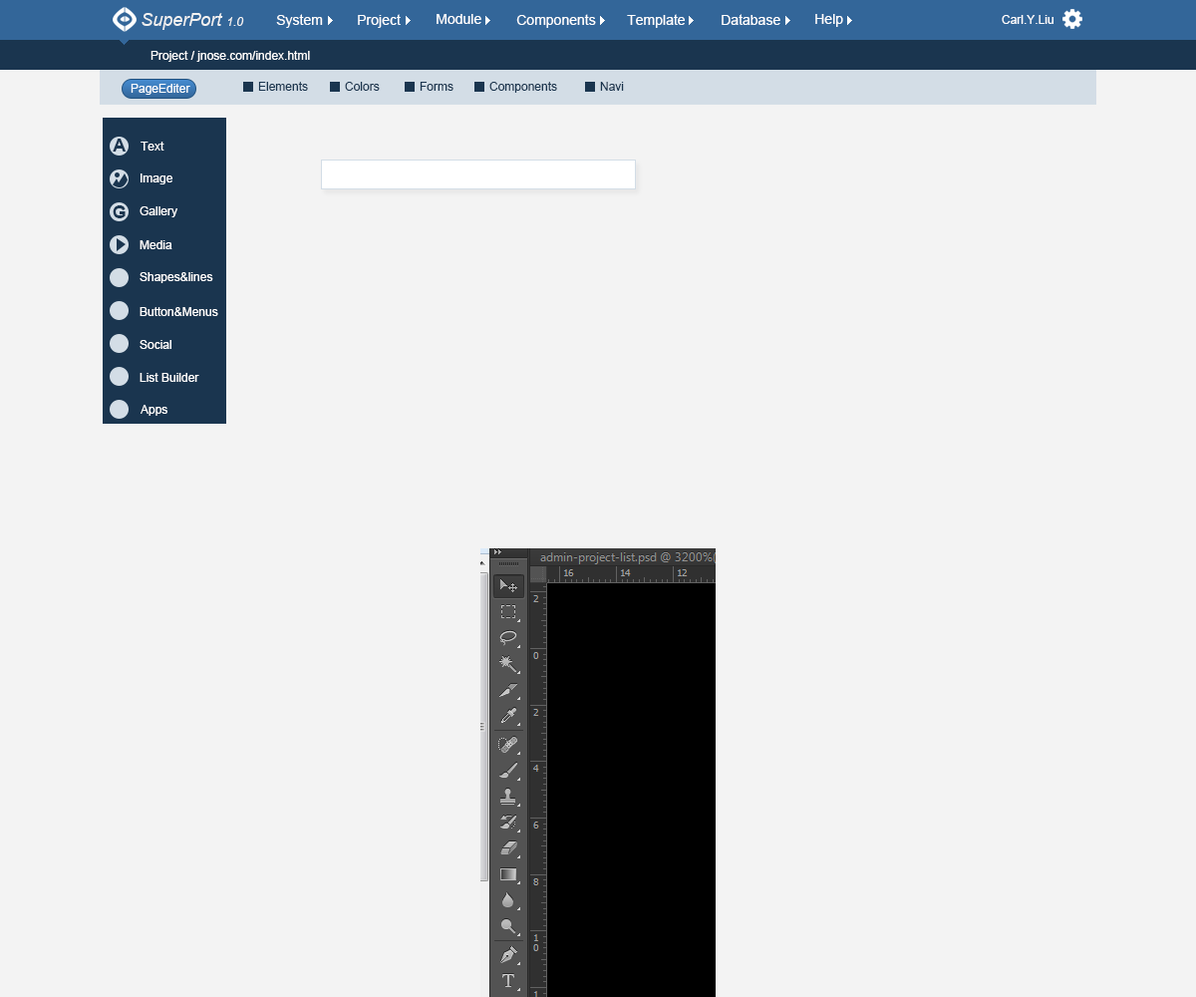
<style>
.page{position:relative;width:1196px;height:997px;background:#f3f3f3}
.page>*{position:absolute;margin:0}
.t1{font:17.9px "Arial-ItalicMT";color:#f1f1f1}
.t2{font:12px "Arial-ItalicMT";color:#f1f1f1}
.t3{font:14px "ArialMT";color:#ffffff}
.t4{font:12px "ArialMT";color:#ffffff}
.t5{font:12px "ArialMT";color:#1a354f}
.t6{font:17.9px "Arial-BoldMT";color:#1a354f}
</style>
<div class="page">
<p class="t1" style="left:142px;top:13px;width:81px;height:17px">SuperPort</p>
<p class="t2" style="left:228px;top:17px;width:16px;height:9px">1.0</p>
<p class="t3" style="left:276px;top:14px;width:47px;height:14px">System</p>
<p class="t3" style="left:358px;top:14px;width:43px;height:14px">Project</p>
<p class="t3" style="left:437px;top:14px;width:44px;height:10px">Module</p>
<p class="t3" style="left:516px;top:14px;width:80px;height:14px">Components</p>
<p class="t3" style="left:627px;top:14px;width:58px;height:14px">Template</p>
<p class="t3" style="left:722px;top:14px;width:59px;height:11px">Database</p>
<p class="t3" style="left:815px;top:14px;width:28px;height:13px">Help</p>
<p class="t4" style="left:1002px;top:15px;width:52px;height:9px">Carl.Y.Liu</p>
<p class="t4" style="left:151px;top:51px;width:159px;height:11px">Project / jnose.com/index.html</p>
<p class="t4" style="left:131px;top:84px;width:59px;height:11px">PageEditer</p>
<p class="t5" style="left:258px;top:82px;width:50px;height:9px">Elements</p>
<p class="t5" style="left:345px;top:82px;width:35px;height:9px">Colors</p>
<p class="t5" style="left:420px;top:82px;width:34px;height:9px">Forms</p>
<p class="t5" style="left:489px;top:82px;width:68px;height:11px">Components</p>
<p class="t5" style="left:600px;top:82px;width:24px;height:9px">Navi</p>
<p class="t6" style="left:113px;top:139px;width:14px;height:13px">A</p>
<p class="t4" style="left:141px;top:142px;width:23px;height:9px">Text</p>
<p class="t4" style="left:141px;top:173px;width:31px;height:11px">Image</p>
<p class="t6" style="left:113px;top:205px;width:13px;height:13px">G</p>
<p class="t4" style="left:140px;top:206px;width:37px;height:11px">Gallery</p>
<p class="t4" style="left:140px;top:240px;width:32px;height:9px">Media</p>
<p class="t4" style="left:140px;top:272px;width:73px;height:11px">Shapes&amp;lines</p>
<p class="t4" style="left:140px;top:307px;width:78px;height:9px">Button&amp;Menus</p>
<p class="t4" style="left:140px;top:340px;width:31px;height:9px">Social</p>
<p class="t4" style="left:140px;top:373px;width:59px;height:9px">List Builder</p>
<p class="t4" style="left:141px;top:405px;width:26px;height:11px">Apps</p>
</div>
